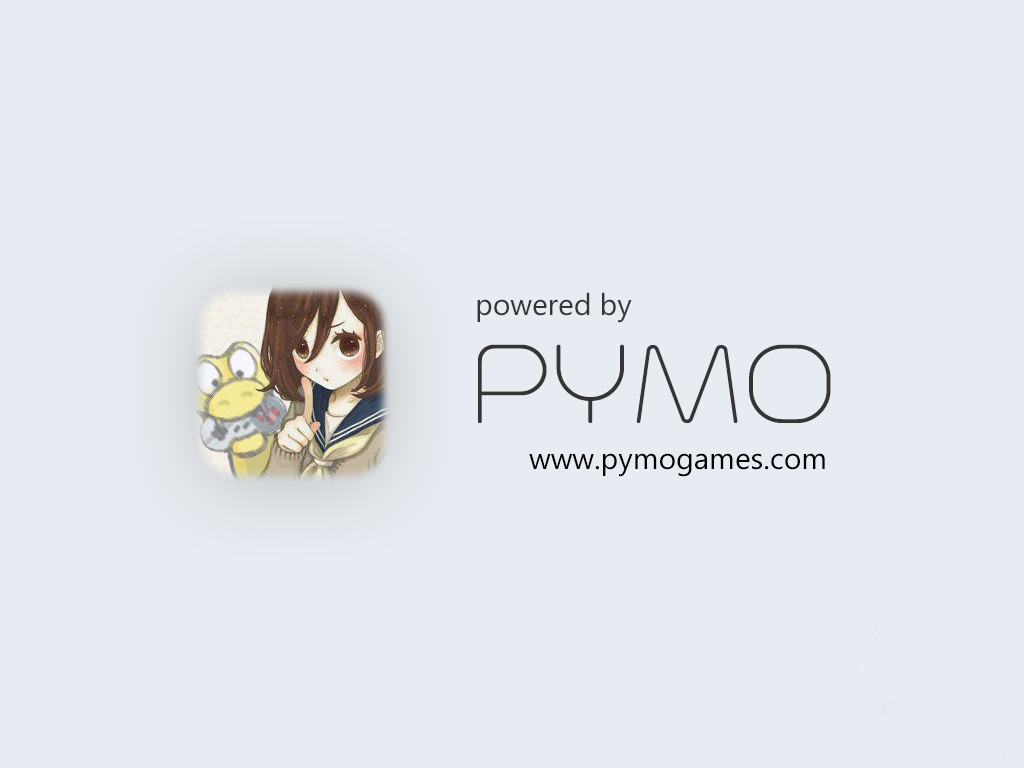
<style>
.page{position:relative;width:1024px;height:768px;background:#e7ecf2}
.page>*{position:absolute;margin:0}
.t1{font:30px "NirmalaUI";color:#353535}
.t2{font:140px "Trench-Thin";color:#353535}
.t3{font:30px "NirmalaUI";color:#000000}
</style>
<div class="page">
<p class="t1" style="left:477px;top:292px;width:155px;height:31px">powered by</p>
<p class="t2" style="left:478px;top:344px;width:353px;height:79px">PYMO</p>
<p class="t3" style="left:529px;top:453px;width:296px;height:24px">www.pymogames.com</p>
</div>
